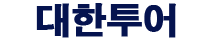
<style>
.page{position:relative;width:200px;height:40px;background:#ffffff}
.page>*{position:absolute;margin:0}
.t1{font:36px "H2gtrE";letter-spacing:-0.025em;color:#05134f;font-weight:bold}
</style>
<div class="page">
<p class="t1" style="left:36px;top:3px;width:140px;height:35px">대한투어</p>
</div>
